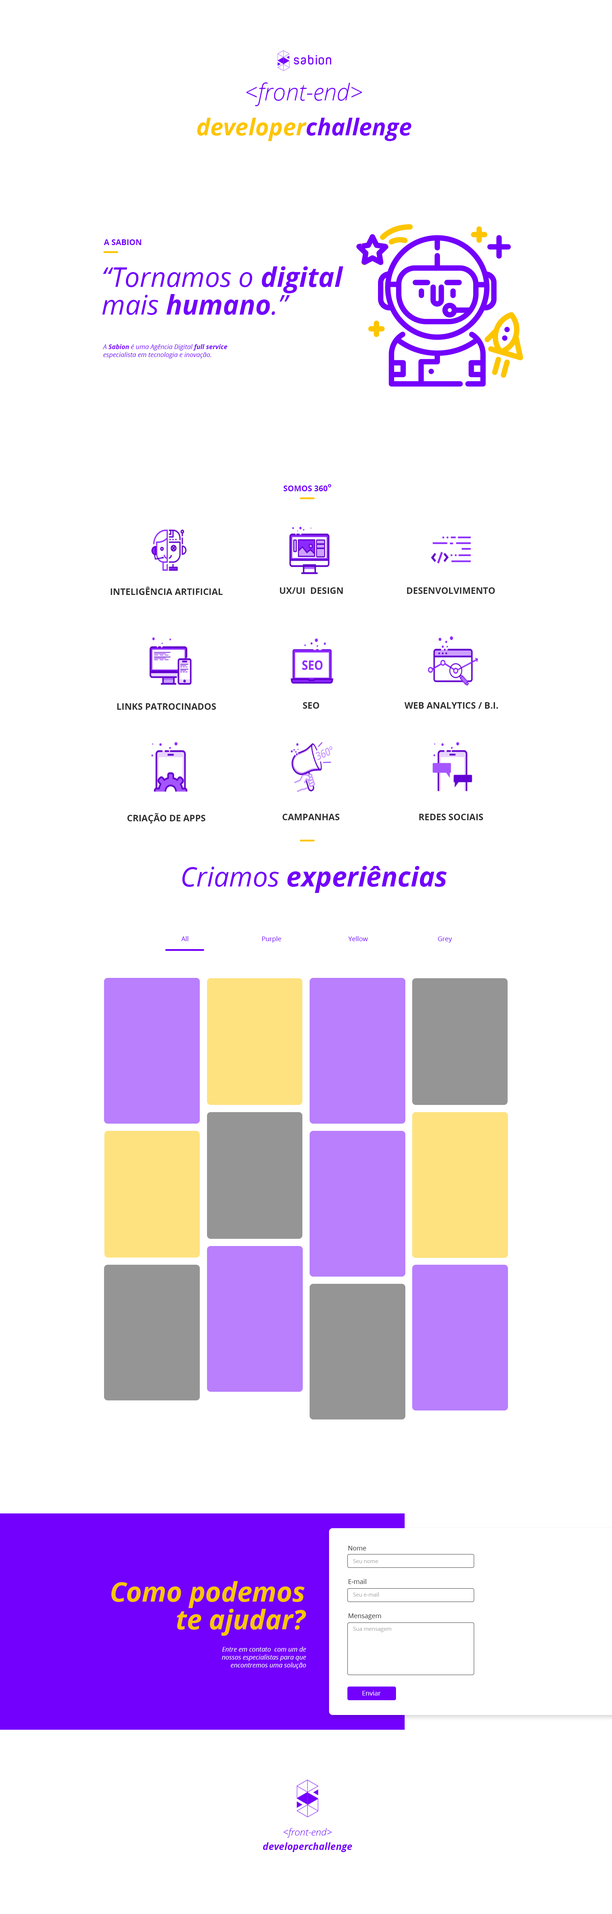
<style>
.page{position:relative;width:612px;height:1914px;background:#ffffff}
.page>*{position:absolute;margin:0}
.t1{font:23.4px "OpenSansLight-Italic";color:#7300fc}
.t2{font:23.4px "OpenSans-BoldItalic";color:#fdc500}
.t3{font:23.4px "OpenSans-BoldItalic";color:#7300fc}
.t4{font:7.9px "OpenSans-Bold";color:#7300fc}
.t5{font:27px/27.8px "OpenSans-Italic";color:#7300fc}
.t6{font:27px/27.8px "OpenSans-BoldItalic";color:#7300fc}
.t7{font:6.5px "OpenSans-Italic";color:#7300fc}
.t8{font:6.5px "OpenSans-BoldItalic";color:#7300fc}
.t9{font:6.1px "OpenSans-Bold";color:#7300fc}
.t10{font:9px "OpenSans-Bold";color:#2d2f2d}
.t11{font:27px "OpenSans-BoldItalic";color:#7300fc}
.t12{font:27px "OpenSans-Italic";color:#7300fc}
.t13{font:6.5px "OpenSans";color:#7300fc}
.t14{font:6.5px "OpenSans";color:#292b29}
.t15{font:5.4px "OpenSans";color:#aaabaa}
.t16{font:27px/27.8px "OpenSans-BoldItalic";color:#fdc500}
.t17{font:6.5px "OpenSans-Italic";color:#ffffff}
.t18{font:6.5px "OpenSans";color:#ffffff}
.t19{font:9.7px "OpenSansLight-Italic";color:#7300fc}
.t20{font:9.7px "OpenSans-BoldItalic";color:#7300fc}
</style>
<div class="page">
<p class="t1" style="left:246px;top:82px;width:116px;height:24px">&lt;front-end&gt;</p>
<p class="t2" style="left:197px;top:118px;width:214px;height:23px">developer<span class="t3">challenge</span></p>
<p class="t4" style="left:104px;top:239px;width:37px;height:6px">A SABION</p>
<p class="t5" style="left:102px;top:266px;width:241px;height:49px">“Tornamos o <span class="t6">digital<br></span>mais <span class="t6">humano</span>.”</p>
<p class="t7" style="left:103px;top:344px;width:125px;height:15px">A <span class="t8">Sabion </span>é uma Agência Digital <span class="t8">full service <br></span>especialista em tecnologia e inovação.</p>
<p class="t4" style="left:283px;top:484px;width:48px;height:7px">SOMOS 360<span class="t9">o</span></p>
<p class="t10" style="left:111px;top:587px;width:112px;height:8px">INTELIGÊNCIA ARTIFICIAL</p>
<p class="t10" style="left:280px;top:588px;width:63px;height:6px">UX/UI  DESIGN</p>
<p class="t10" style="left:407px;top:588px;width:88px;height:6px">DESENVOLVIMENTO</p>
<p class="t10" style="left:117px;top:703px;width:99px;height:7px">LINKS PATROCINADOS</p>
<p class="t10" style="left:303px;top:702px;width:16px;height:7px">SEO</p>
<p class="t10" style="left:404px;top:702px;width:94px;height:7px">WEB ANALYTICS / B.I.</p>
<p class="t10" style="left:127px;top:813px;width:79px;height:11px">CRIAÇÃO DE APPS</p>
<p class="t10" style="left:283px;top:814px;width:56px;height:6px">CAMPANHAS</p>
<p class="t10" style="left:419px;top:814px;width:64px;height:6px">REDES SOCIAIS</p>
<p class="t11" style="left:182px;top:866px;width:265px;height:27px"><span class="t12">Criamos </span>experiências</p>
<p class="t13" style="left:181px;top:936px;width:7px;height:5px">All</p>
<p class="t13" style="left:262px;top:936px;width:19px;height:7px">Purple</p>
<p class="t13" style="left:348px;top:936px;width:20px;height:5px">Yellow</p>
<p class="t13" style="left:438px;top:937px;width:14px;height:6px">Grey</p>
<p class="t14" style="left:348px;top:1546px;width:18px;height:5px">Nome</p>
<p class="t15" style="left:353px;top:1560px;width:25px;height:3px">Seu nome</p>
<p class="t16" style="left:111px;top:1581px;width:195px;height:55px;text-align:right">Como podemos<br>te ajudar?</p>
<p class="t14" style="left:348px;top:1579px;width:18px;height:5px">E-mail</p>
<p class="t15" style="left:353px;top:1593px;width:26px;height:4px">Seu e-mail</p>
<p class="t14" style="left:348px;top:1614px;width:33px;height:6px">Mensagem</p>
<p class="t15" style="left:353px;top:1627px;width:38px;height:6px">Sua mensagem</p>
<p class="t17" style="left:222px;top:1647px;width:84px;height:22px;text-align:right">Entre em contato  com um de<br>nossos especialistas para que<br>encontremos uma solução</p>
<p class="t18" style="left:363px;top:1691px;width:18px;height:5px">Enviar</p>
<p class="t19" style="left:283px;top:1828px;width:49px;height:10px">&lt;front-end&gt;</p>
<p class="t20" style="left:263px;top:1843px;width:89px;height:10px">developerchallenge</p>
</div>
